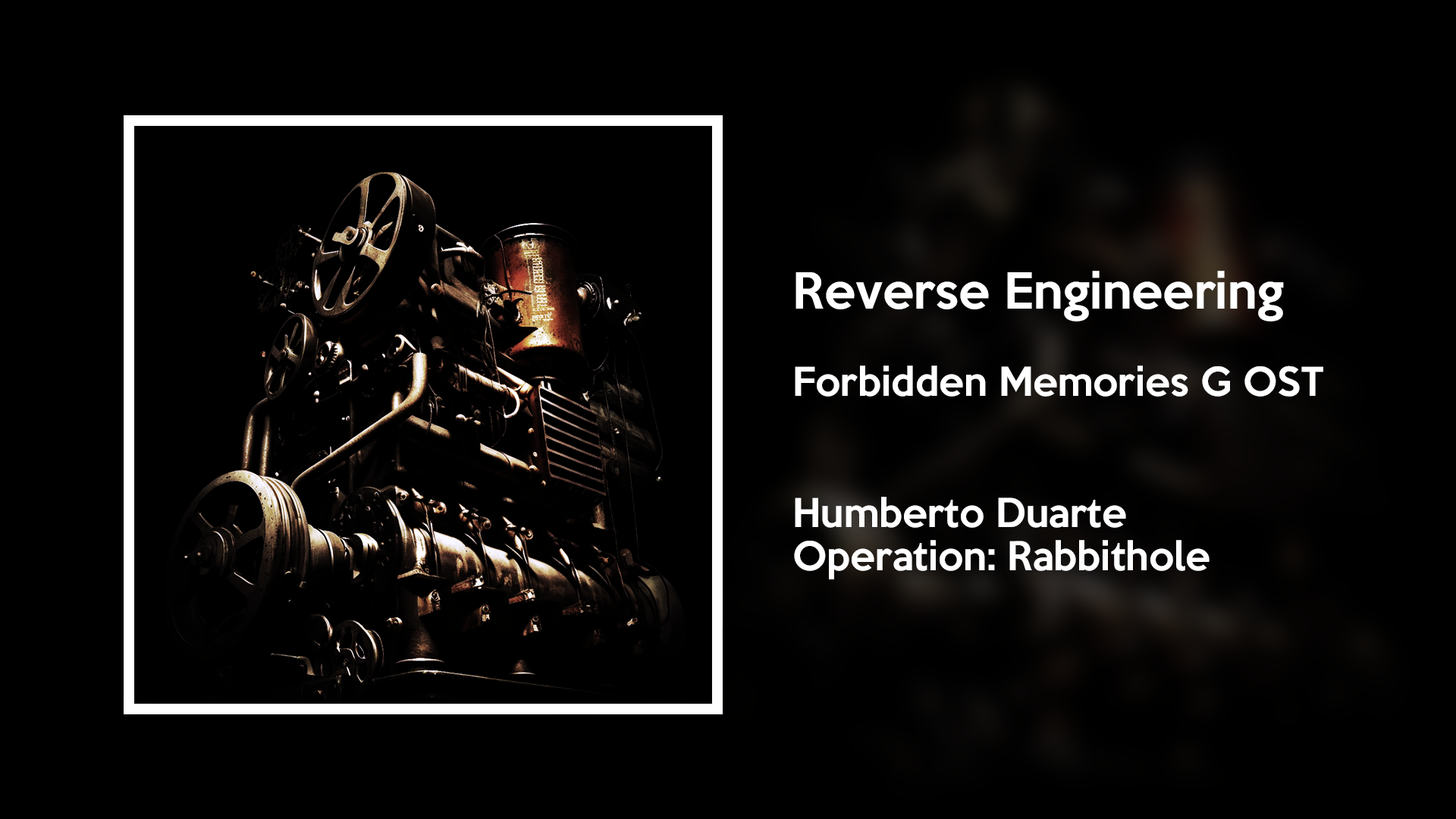
<style>
.page{position:relative;width:1456px;height:819px;background:#000000}
.page>*{position:absolute;margin:0}
.t1{font:36.4px "KeepCalm-Medium";color:#ffffff}
.t2{font:45.5px "KeepCalm-Medium";color:#ffffff}
</style>
<div class="page">
<p class="t1" style="left:794px;top:271px;width:529px;height:308px"><span class="t2">Reverse Engineering<br></span><br>Forbidden Memories G OST<br><br><br>Humberto Duarte<br>Operation: Rabbithole</p>
</div>
